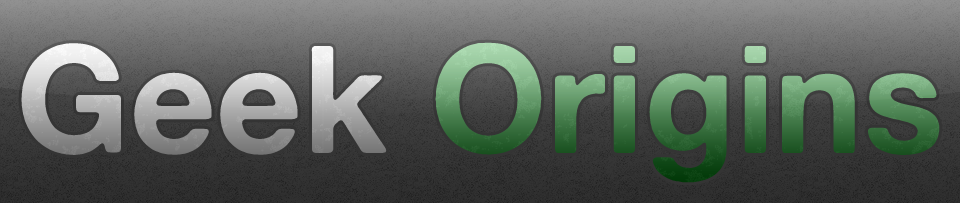
<style>
.page{position:relative;width:960px;height:203px}
.page>*{position:absolute;margin:0}
.t1{font:150px "AlteHaasGrotesk_Bold"}
</style>
<div class="page">
<p class="t1" style="left:21px;top:42px;width:919px;height:141px">Geek Origins</p>
</div>
